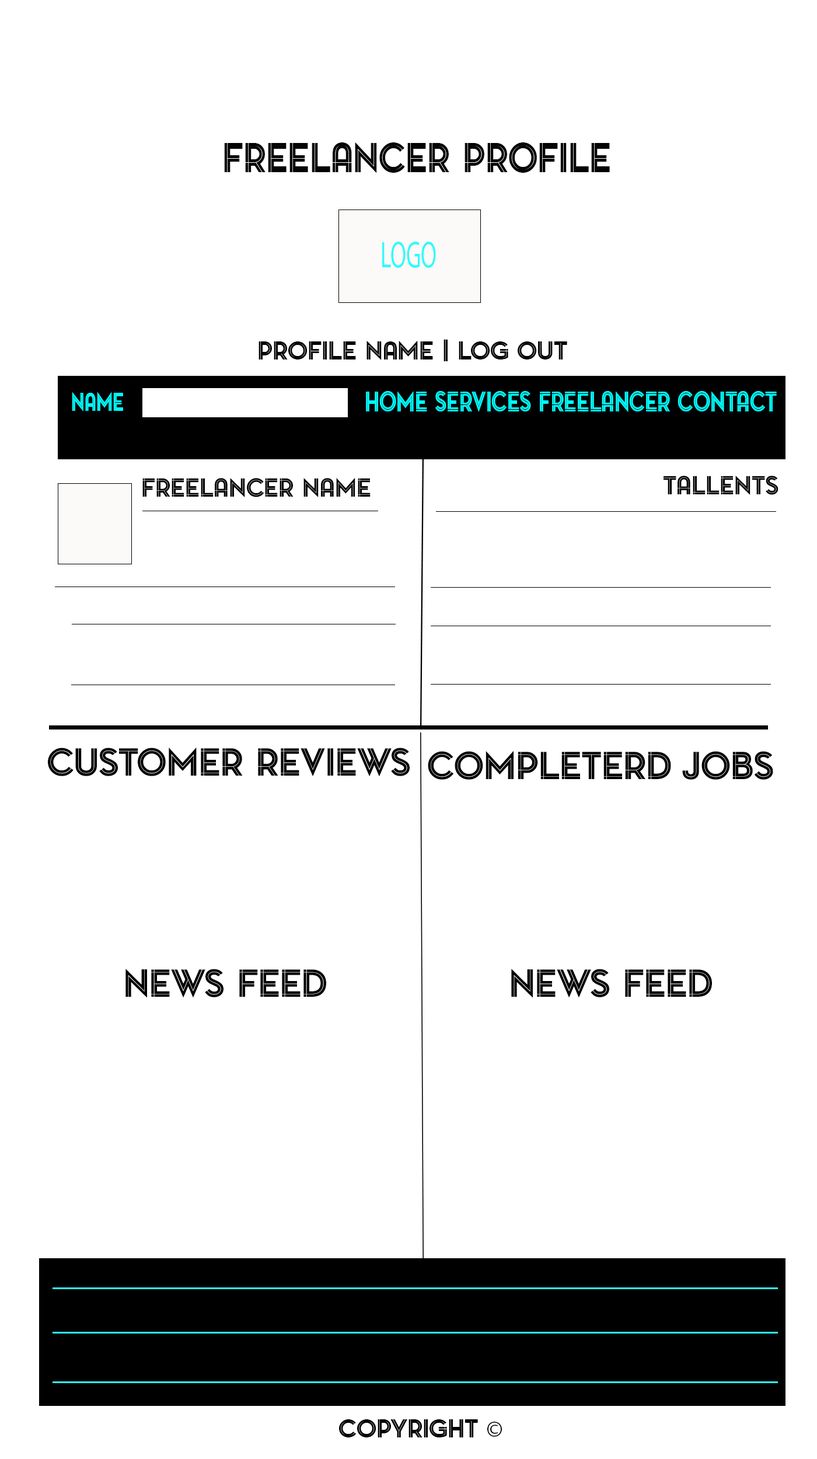
<style>
.page{position:relative;width:817px;height:1459px;background:#ffffff}
.page>*{position:absolute;margin:0}
.t1{font:39.4px "PontiacInlineRegular";color:#040404;scale:0.92 1}
.t2{font:37.6px "MyriadPro-Regular";color:#31fbfa;scale:0.61 1}
.t3{font:24.3px "PontiacInlineRegular";color:#040404}
.t4{font:24.6px "PontiacInlineRegular";color:#00ffff;scale:0.77 1}
.t5{font:26.1px "PontiacInlineRegular";color:#00ffff;scale:0.81 1}
.t6{font:24.3px "PontiacInlineRegular";color:#000000}
.t7{font:36.5px "PontiacInlineRegular";color:#000000}
.t8{font:24.3px "MyriadPro-Regular";color:#000000}
</style>
<div class="page">
<p class="t1" style="left:224px;top:142px;width:386px;height:31px">Freelancer Profile</p>
<p class="t2" style="left:382px;top:242px;width:54px;height:26px">LOGO</p>
<p class="t3" style="left:259px;top:339px;width:308px;height:22px">Profile Name | Log Out</p>
<p class="t4" style="left:72px;top:392px;width:51px;height:20px">NAME</p>
<p class="t5" style="left:366px;top:391px;width:411px;height:21px">HOME SERVICES FREELANCER CONTACT</p>
<p class="t6" style="left:142px;top:478px;width:229px;height:19px">Freelancer Name</p>
<p class="t6" style="left:664px;top:476px;width:115px;height:19px">Tallents</p>
<p class="t7" style="left:48px;top:748px;width:362px;height:29px">Customer Reviews</p>
<p class="t7" style="left:428px;top:751px;width:345px;height:29px">Completerd Jobs</p>
<p class="t7" style="left:125px;top:969px;width:201px;height:29px">NEWS FEED</p>
<p class="t7" style="left:511px;top:969px;width:201px;height:29px">NEWS FEED</p>
<p class="t6" style="left:339px;top:1420px;width:163px;height:18px">COPYRIGHT <span class="t8">©</span></p>
</div>
